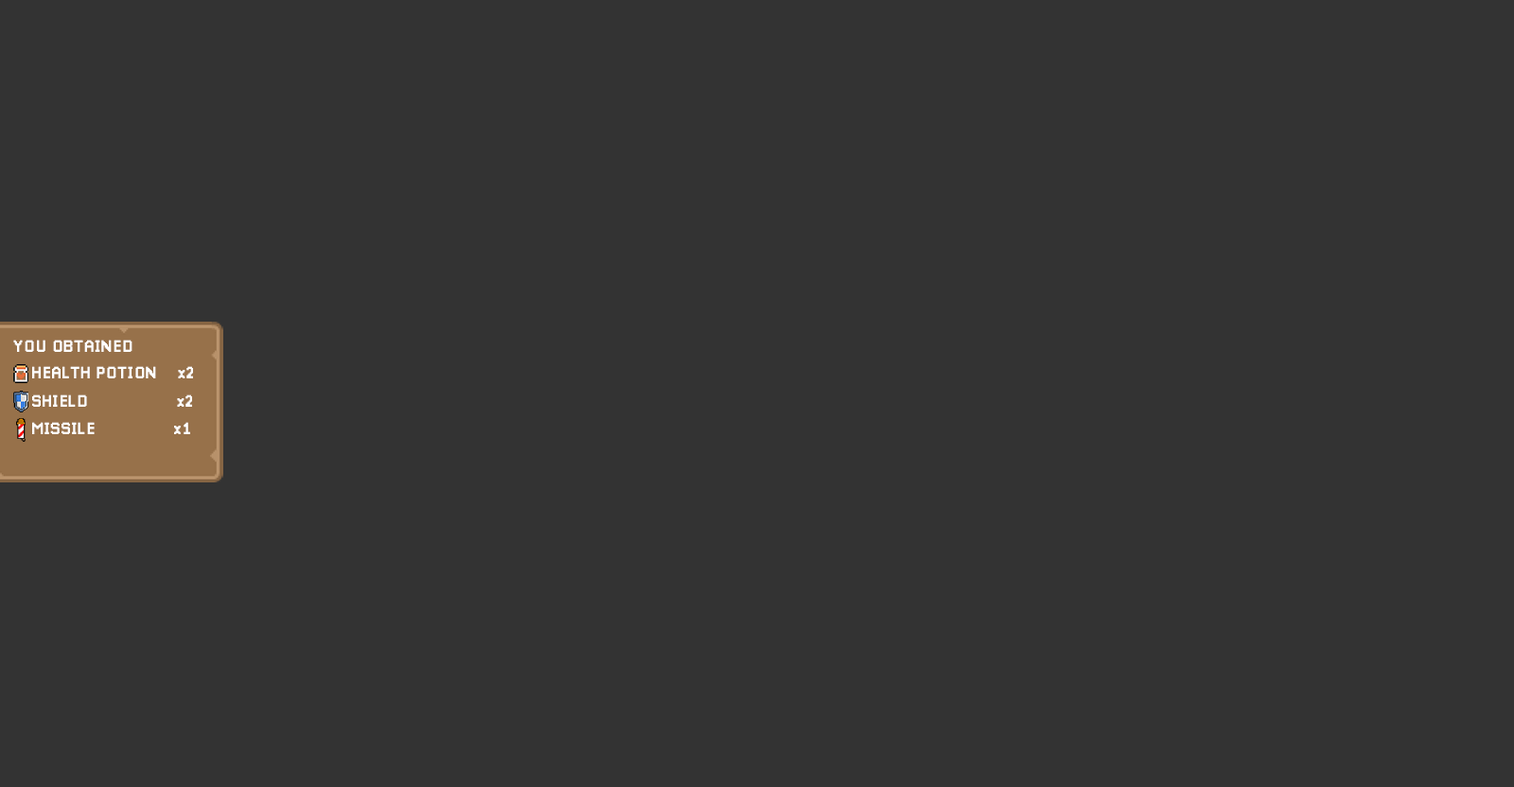
<style>
.page{position:relative;width:1514px;height:787px;background:#333333}
.page>*{position:absolute;margin:0}
.t1{font:16.7px "Pixellari";color:#ffffff}
</style>
<div class="page">
<p class="t1" style="left:13px;top:340px;width:120px;height:12px">YOU OBTAINED</p>
<p class="t1" style="left:32px;top:366px;width:161px;height:13px">HEALTH POTION    x2</p>
<p class="t1" style="left:32px;top:395px;width:160px;height:12px">SHIELD                 x2</p>
<p class="t1" style="left:32px;top:422px;width:158px;height:12px">MISSILE               x1</p>
</div>
